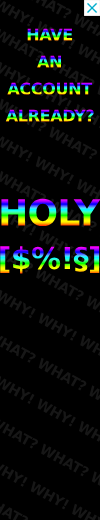
<style>
.page{position:relative;width:100px;height:520px;background:#000000}
.page>*{position:absolute;margin:0}
.t1{font:16px "MontserratRoman-ExtraBold";letter-spacing:-0.02em;text-transform:uppercase}
.t2{font:36px "MontserratRoman-ExtraBold";letter-spacing:-0.02em;text-transform:uppercase}
.t3{font:30px "MontserratRoman-ExtraBold";letter-spacing:-0.02em;text-transform:uppercase}
</style>
<div class="page">
<p class="t1" style="left:27px;top:28px;width:46px;height:13px">have</p>
<p class="t1" style="left:37px;top:55px;width:25px;height:13px">an</p>
<p class="t1" style="left:7px;top:82px;width:86px;height:13px">account</p>
<p class="t1" style="left:5px;top:109px;width:89px;height:13px">already?</p>
<p class="t2" style="left:1px;top:198px;width:100px;height:28px">holy</p>
<p class="t3" style="left:0px;top:246px;width:100px;height:28px">[$%!§]</p>
</div>
